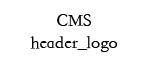
<style>
.page{position:relative;width:150px;height:60px;background:#ffffff}
.page>*{position:absolute;margin:0}
.t1{font:18px "STFangsong";color:#000000}
</style>
<div class="page">
<p class="t1" style="left:30px;top:14px;width:88px;height:38px;text-align:center">CMS<br>header_logo</p>
</div>
